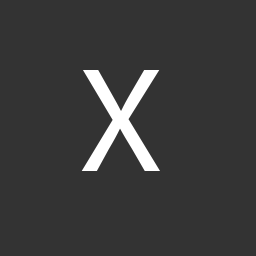
<style>
.page{position:relative;width:256px;height:256px;background:#333333}
.page>*{position:absolute;margin:0}
.t1{font:150px "MyriadPro-Regular";color:#ffffff}
</style>
<div class="page">
<p class="t1" style="left:81px;top:70px;width:79px;height:101px">X</p>
</div>
